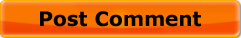
<style>
.page{position:relative;width:241px;height:38px}
.page>*{position:absolute;margin:0}
.t1{font:20px "Verdana-Bold";color:#000000}
</style>
<div class="page">
<p class="t1" style="left:40px;top:11px;width:161px;height:16px">Post Comment</p>
</div>
